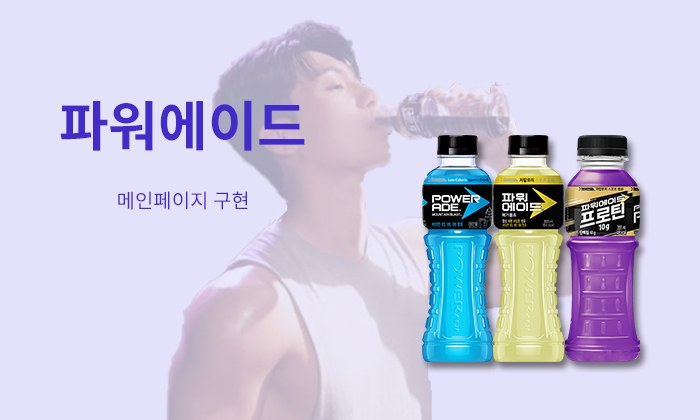
<style>
.page{position:relative;width:700px;height:420px;background:#e4e1fa}
.page>*{position:absolute;margin:0}
.t1{font:54px "NotoSansKR-Bold";color:#432acb}
.t2{font:20px "NotoSansKR-Regular";color:#432acb}
</style>
<div class="page">
<p class="t1" style="left:60px;top:100px;width:245px;height:51px">파워에이드</p>
<p class="t2" style="left:118px;top:191px;width:130px;height:19px">메인페이지 구현</p>
</div>
